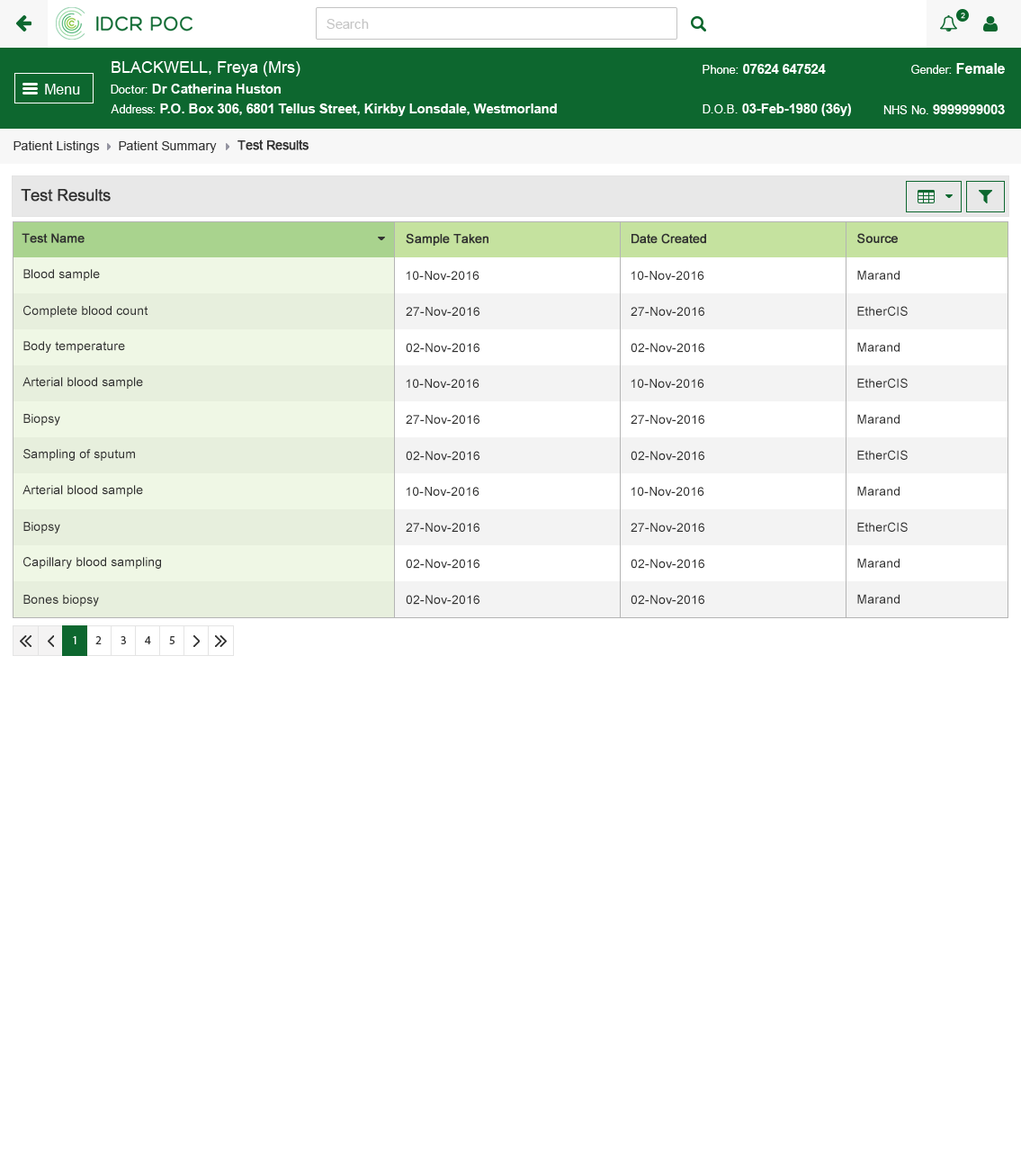
<style>
.page{position:relative;width:1021px;height:1168px;background:#ffffff}
.page>*{position:absolute;margin:0}
.t1{font:12.6px "ArialMT";color:#313131}
.t2{font:12.6px "ArialMT";color:#313131;font-weight:bold}
.t3{font:16.2px "ArialMT";color:#303030;font-weight:bold}
.t4{font:12.6px "ArialMT";color:#303030;font-weight:bold}
.t5{font:12.6px "ArialMT";color:#303030}
</style>
<div class="page">
<p class="t1" style="left:13px;top:140px;width:87px;height:13px">Patient Listings</p>
<p class="t1" style="left:119px;top:140px;width:98px;height:13px">Patient Summary</p>
<p class="t2" style="left:238px;top:139px;width:71px;height:11px">Test Results</p>
<p class="t3" style="left:21px;top:189px;width:90px;height:13px">Test Results</p>
<p class="t4" style="left:22px;top:233px;width:63px;height:10px">Test Name</p>
<p class="t4" style="left:406px;top:233px;width:83px;height:13px">Sample Taken</p>
<p class="t4" style="left:632px;top:233px;width:74px;height:11px">Date Created</p>
<p class="t4" style="left:857px;top:233px;width:41px;height:11px">Source</p>
<p class="t5" style="left:23px;top:269px;width:77px;height:12px">Blood sample</p>
<p class="t5" style="left:857px;top:270px;width:43px;height:10px">Marand</p>
<p class="t5" style="left:406px;top:271px;width:74px;height:9px">10-Nov-2016</p>
<p class="t5" style="left:631px;top:271px;width:73px;height:9px">10-Nov-2016</p>
<p class="t5" style="left:23px;top:305px;width:125px;height:13px">Complete blood count</p>
<p class="t5" style="left:857px;top:306px;width:51px;height:10px">EtherCIS</p>
<p class="t5" style="left:406px;top:307px;width:74px;height:9px">27-Nov-2016</p>
<p class="t5" style="left:631px;top:307px;width:73px;height:9px">27-Nov-2016</p>
<p class="t5" style="left:23px;top:341px;width:102px;height:12px">Body temperature</p>
<p class="t5" style="left:857px;top:342px;width:43px;height:10px">Marand</p>
<p class="t5" style="left:406px;top:343px;width:74px;height:10px">02-Nov-2016</p>
<p class="t5" style="left:631px;top:343px;width:73px;height:10px">02-Nov-2016</p>
<p class="t5" style="left:22px;top:377px;width:121px;height:12px">Arterial blood sample</p>
<p class="t5" style="left:857px;top:378px;width:51px;height:10px">EtherCIS</p>
<p class="t5" style="left:406px;top:379px;width:74px;height:9px">10-Nov-2016</p>
<p class="t5" style="left:631px;top:379px;width:73px;height:9px">10-Nov-2016</p>
<p class="t5" style="left:23px;top:414px;width:37px;height:12px">Biopsy</p>
<p class="t5" style="left:857px;top:414px;width:43px;height:10px">Marand</p>
<p class="t5" style="left:406px;top:415px;width:74px;height:9px">27-Nov-2016</p>
<p class="t5" style="left:631px;top:415px;width:73px;height:9px">27-Nov-2016</p>
<p class="t5" style="left:23px;top:449px;width:112px;height:12px">Sampling of sputum</p>
<p class="t5" style="left:857px;top:450px;width:51px;height:10px">EtherCIS</p>
<p class="t5" style="left:406px;top:451px;width:74px;height:10px">02-Nov-2016</p>
<p class="t5" style="left:631px;top:451px;width:73px;height:10px">02-Nov-2016</p>
<p class="t5" style="left:22px;top:485px;width:121px;height:12px">Arterial blood sample</p>
<p class="t5" style="left:857px;top:486px;width:43px;height:10px">Marand</p>
<p class="t5" style="left:406px;top:487px;width:74px;height:9px">10-Nov-2016</p>
<p class="t5" style="left:631px;top:487px;width:73px;height:9px">10-Nov-2016</p>
<p class="t5" style="left:23px;top:522px;width:37px;height:12px">Biopsy</p>
<p class="t5" style="left:857px;top:522px;width:51px;height:10px">EtherCIS</p>
<p class="t5" style="left:406px;top:523px;width:74px;height:9px">27-Nov-2016</p>
<p class="t5" style="left:631px;top:523px;width:73px;height:9px">27-Nov-2016</p>
<p class="t5" style="left:23px;top:557px;width:138px;height:12px">Capillary blood sampling</p>
<p class="t5" style="left:857px;top:558px;width:43px;height:10px">Marand</p>
<p class="t5" style="left:406px;top:559px;width:74px;height:10px">02-Nov-2016</p>
<p class="t5" style="left:631px;top:559px;width:73px;height:10px">02-Nov-2016</p>
<p class="t5" style="left:857px;top:594px;width:43px;height:10px">Marand</p>
<p class="t5" style="left:23px;top:595px;width:76px;height:11px">Bones biopsy</p>
<p class="t5" style="left:406px;top:595px;width:74px;height:10px">02-Nov-2016</p>
<p class="t5" style="left:631px;top:595px;width:73px;height:10px">02-Nov-2016</p>
</div>
